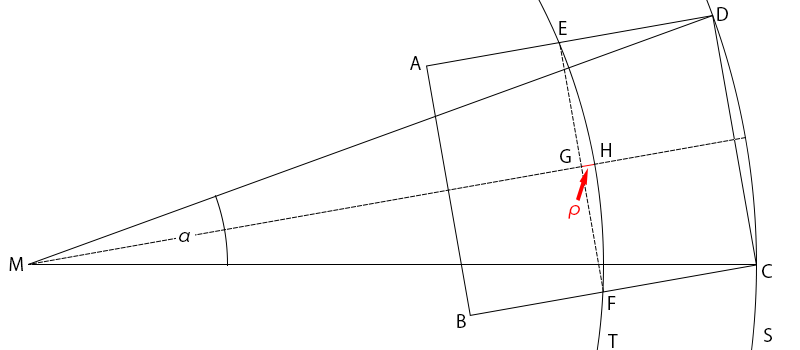
<style>
.page{position:relative;width:800px;height:350px;background:#ffffff}
.page>*{position:absolute;margin:0}
.t1{font:18px "KozGoPr6N-Regular";color:#000000}
.t2{font:18px "KozGoPr6N-Regular";color:#fe0000}
</style>
<div class="page">
<p class="t1" style="left:717px;top:7px;width:11px;height:14px">D</p>
<p class="t1" style="left:559px;top:21px;width:8px;height:14px">E</p>
<p class="t1" style="left:410px;top:56px;width:11px;height:14px">A</p>
<p class="t1" style="left:560px;top:149px;width:11px;height:14px">G</p>
<p class="t1" style="left:601px;top:143px;width:10px;height:14px">H</p>
<p class="t2" style="left:568px;top:205px;width:12px;height:14px">ρ</p>
<p class="t1" style="left:179px;top:232px;width:11px;height:10px">α</p>
<p class="t1" style="left:9px;top:257px;width:14px;height:14px">M</p>
<p class="t1" style="left:762px;top:264px;width:10px;height:14px">C</p>
<p class="t1" style="left:608px;top:296px;width:8px;height:14px">F</p>
<p class="t1" style="left:457px;top:314px;width:9px;height:14px">B</p>
<p class="t1" style="left:764px;top:328px;width:8px;height:14px">S</p>
<p class="t1" style="left:608px;top:334px;width:10px;height:14px">T</p>
</div>
